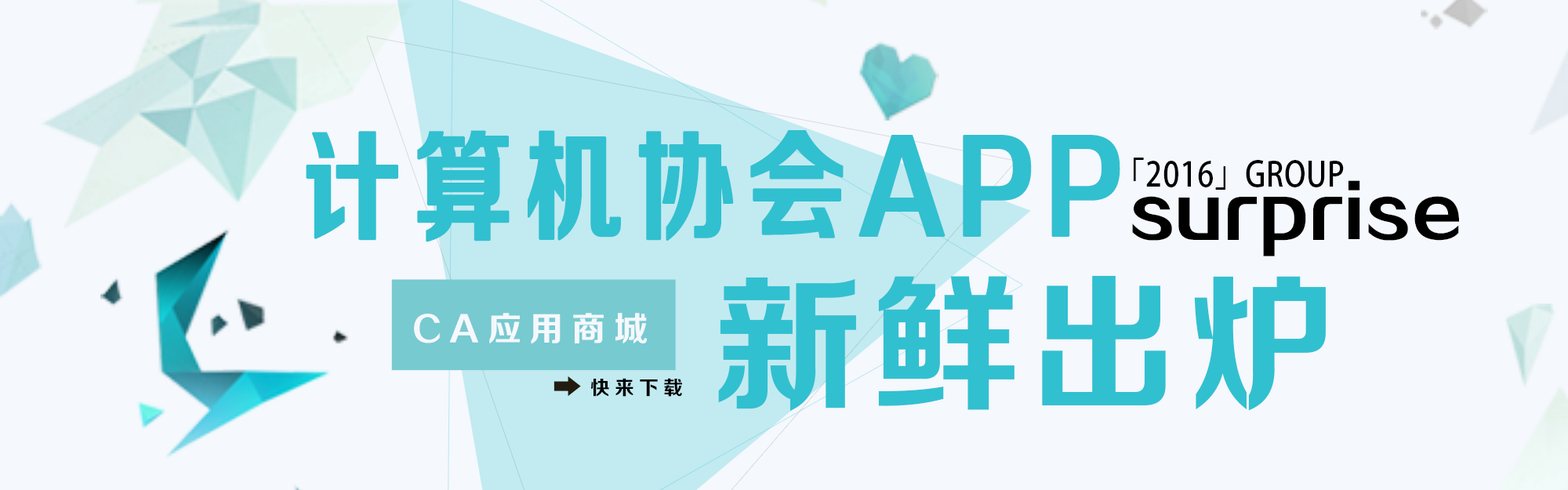
<style>
.page{position:relative;width:1568px;height:490px;background:#f5f8fd}
.page>*{position:absolute;margin:0}
.t1{font:118.9px "FZZCHJW--GB1-0";letter-spacing:0.09em;color:#31c0d0;font-weight:bold;scale:0.84 1}
.t2{font:33.7px "AdobeHeitiStd-Regular";letter-spacing:0.025em;color:#000000;text-transform:uppercase;scale:0.88 1}
.t3{font:69.5px "FZZCHJW--GB1-0";color:#000000}
.t4{font:148.9px "FZZCHJW--GB1-0";letter-spacing:0.06em;color:#31c0d0}
.t5{font:34px "FZZCHJW--GB1-0";letter-spacing:0.239em;color:#f5f8fd}
.t6{font:19.6px "FZZCHJW--GB1-0";letter-spacing:0.239em;color:#000000}
</style>
<div class="page">
<p class="t1" style="left:306px;top:130px;width:814px;height:112px">计算机协会APP</p>
<p class="t2" style="left:1134px;top:158px;width:210px;height:32px">「2016」GROUP</p>
<p class="t3" style="left:1132px;top:180px;width:327px;height:76px">surprise</p>
<p class="t4" style="left:718px;top:275px;width:608px;height:136px">新鲜出炉</p>
<p class="t5" style="left:414px;top:313px;width:233px;height:31px">CA应用商城</p>
<p class="t6" style="left:591px;top:378px;width:91px;height:19px">快来下载</p>
</div>
